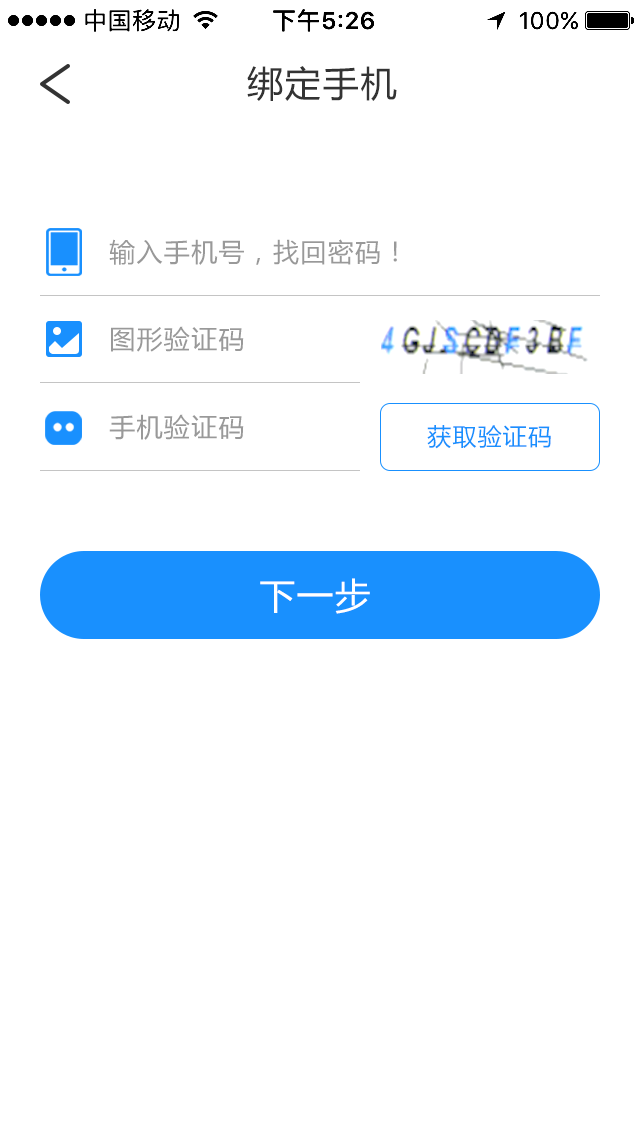
<style>
.page{position:relative;width:640px;height:1136px;background:#ffffff}
.page>*{position:absolute;margin:0}
.t1{font:36px "MicrosoftYaHei";letter-spacing:0.05em;color:#333333}
.t2{font:26px "MicrosoftYaHei";letter-spacing:0.05em;color:#999999}
.t3{font:24px "MicrosoftYaHei";letter-spacing:0.05em;color:#1990fe}
.t4{font:36px "MicrosoftYaHei";letter-spacing:0.05em;color:#ffffff}
</style>
<div class="page">
<p class="t1" style="left:247px;top:66px;width:150px;height:35px">绑定手机</p>
<p class="t2" style="left:109px;top:239px;width:288px;height:26px">输入手机号，找回密码！</p>
<p class="t2" style="left:111px;top:326px;width:133px;height:26px">图形验证码</p>
<p class="t2" style="left:109px;top:414px;width:135px;height:26px">手机验证码</p>
<p class="t3" style="left:427px;top:425px;width:124px;height:24px">获取验证码</p>
<p class="t4" style="left:260px;top:578px;width:110px;height:36px">下一步</p>
</div>
